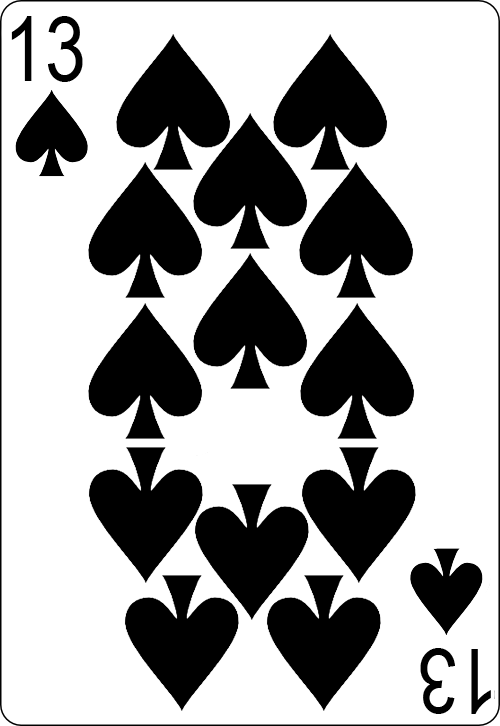
<style>
.page{position:relative;width:500px;height:726px;background:#ffffff}
.page>*{position:absolute;margin:0}
.t1{font:89.8px "ArialNarrow";color:#000000}
</style>
<div class="page">
<p class="t1" style="left:11px;top:16px;width:72px;height:66px">13</p>
<p class="t1" style="left:420px;top:648px;width:71px;height:66px;rotate:180deg">13</p>
</div>
